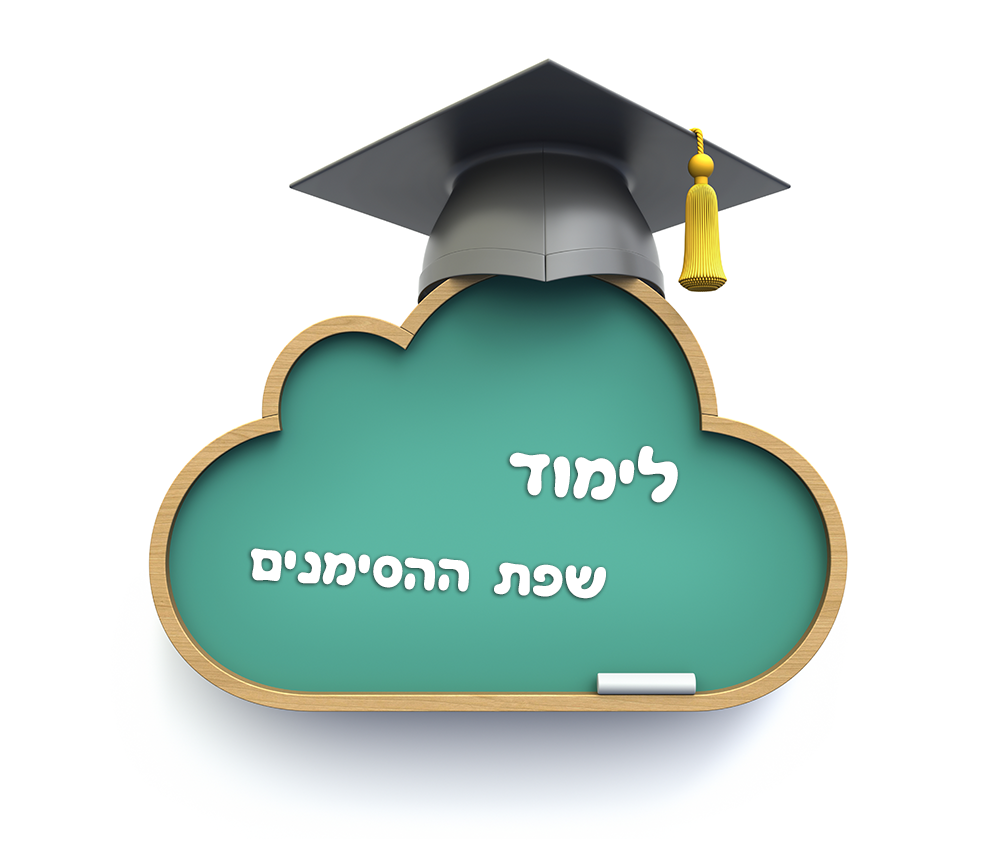
<style>
.page{position:relative;width:1000px;height:841px;background:#ffffff}
.page>*{position:absolute;margin:0}
.t1{font:65px "GanCLM-Bold";color:#ffffff}
.t2{font:50px "GanCLM-Bold";color:#ffffff}
</style>
<div class="page">
<p class="t1" style="left:509px;top:446px;width:169px;height:57px;rotate:3deg">דומיל</p>
<p class="t2" style="left:251px;top:548px;width:355px;height:51px;rotate:3deg">םינמיסהה תפש</p>
</div>
